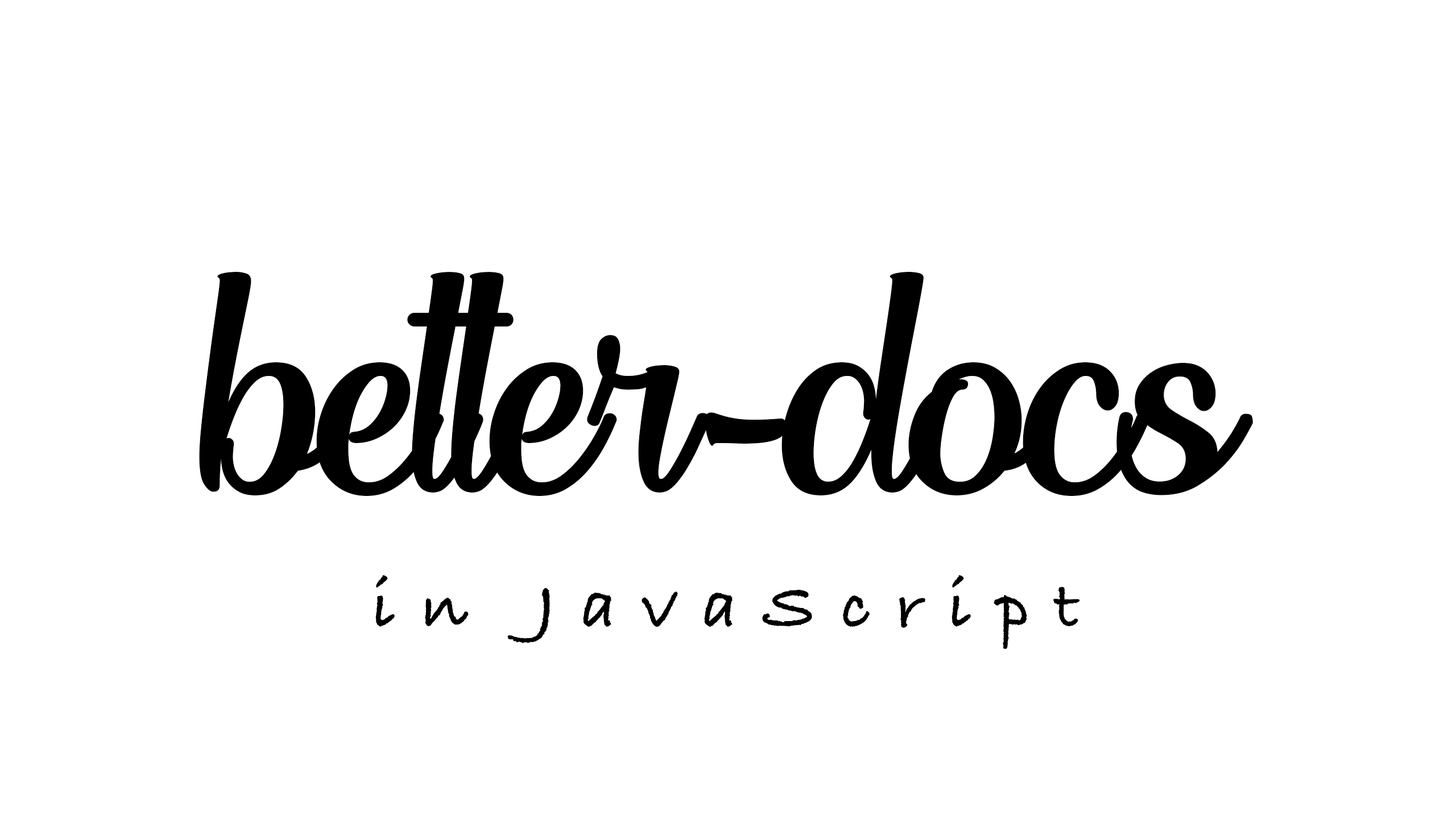
<style>
.page{position:relative;width:1456px;height:819px;background:#ffffff}
.page>*{position:absolute;margin:0}
.t1{font:454.4px "DreamHer-Regular";letter-spacing:-0.035em;color:#000000}
.t2{font:69.6px "BradleyHandITCTT-Bold";letter-spacing:0.365em;color:#000000}
</style>
<div class="page">
<p class="t1" style="left:199px;top:272px;width:1054px;height:224px">better-docs</p>
<p class="t2" style="left:375px;top:575px;width:705px;height:74px">in JavaScript</p>
</div>
